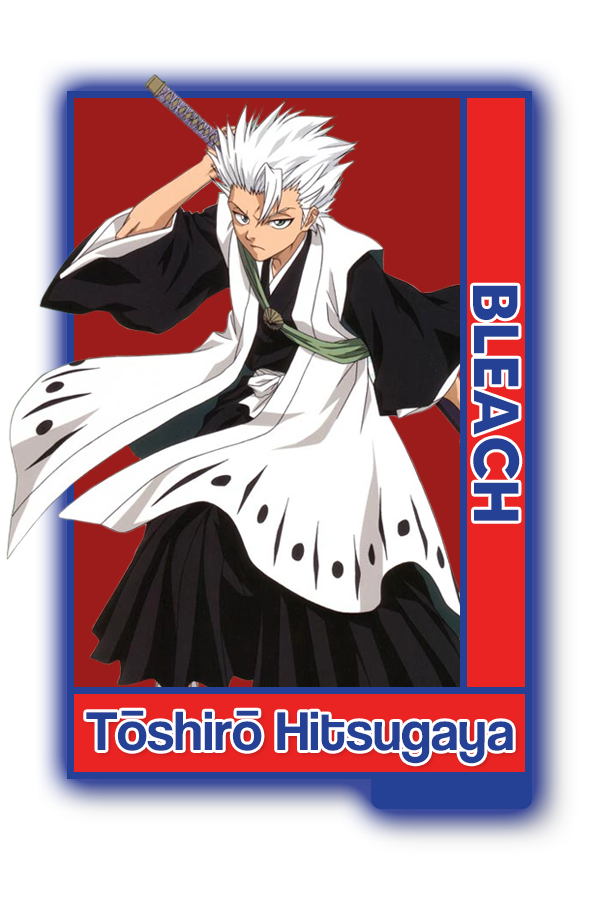
<style>
.page{position:relative;width:600px;height:900px;background:#ffffff}
.page>*{position:absolute;margin:0}
.t1{font:63.6px "MADETOMMY-Bold";color:#254195}
.t2{font:56.7px "CoolveticaRg-Regular";color:#254195}
</style>
<div class="page">
<p class="t1" style="left:473px;top:285px;width:47px;height:236px;rotate:90deg">BLEACH</p>
<p class="t2" style="left:86px;top:710px;width:427px;height:54px">Tōshirō Hitsugaya</p>
</div>
